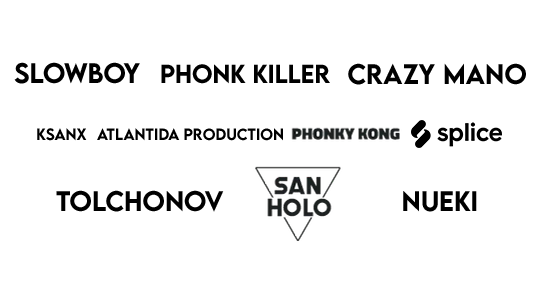
<style>
.page{position:relative;width:540px;height:304px;background:#ffffff}
.page>*{position:absolute;margin:0}
.t1{font:25.1px "LEMONMILK-Medium";color:#000000}
.t2{font:23.2px "LEMONMILK-Medium";color:#000000}
.t3{font:14.5px "LEMONMILK-Medium";color:#000000}
</style>
<div class="page">
<p class="t1" style="left:14px;top:62px;width:126px;height:22px">Slowboy</p>
<p class="t2" style="left:161px;top:64px;width:169px;height:20px">Phonk Killer</p>
<p class="t1" style="left:348px;top:63px;width:178px;height:22px">CRAZY MANO</p>
<p class="t3" style="left:37px;top:128px;width:50px;height:13px">Ksanx</p>
<p class="t3" style="left:97px;top:128px;width:186px;height:13px">ATLANTIDA PRODUCTION</p>
<p class="t1" style="left:56px;top:190px;width:168px;height:22px">TOLCHONOV</p>
<p class="t1" style="left:403px;top:191px;width:74px;height:21px">NUEKI</p>
</div>
